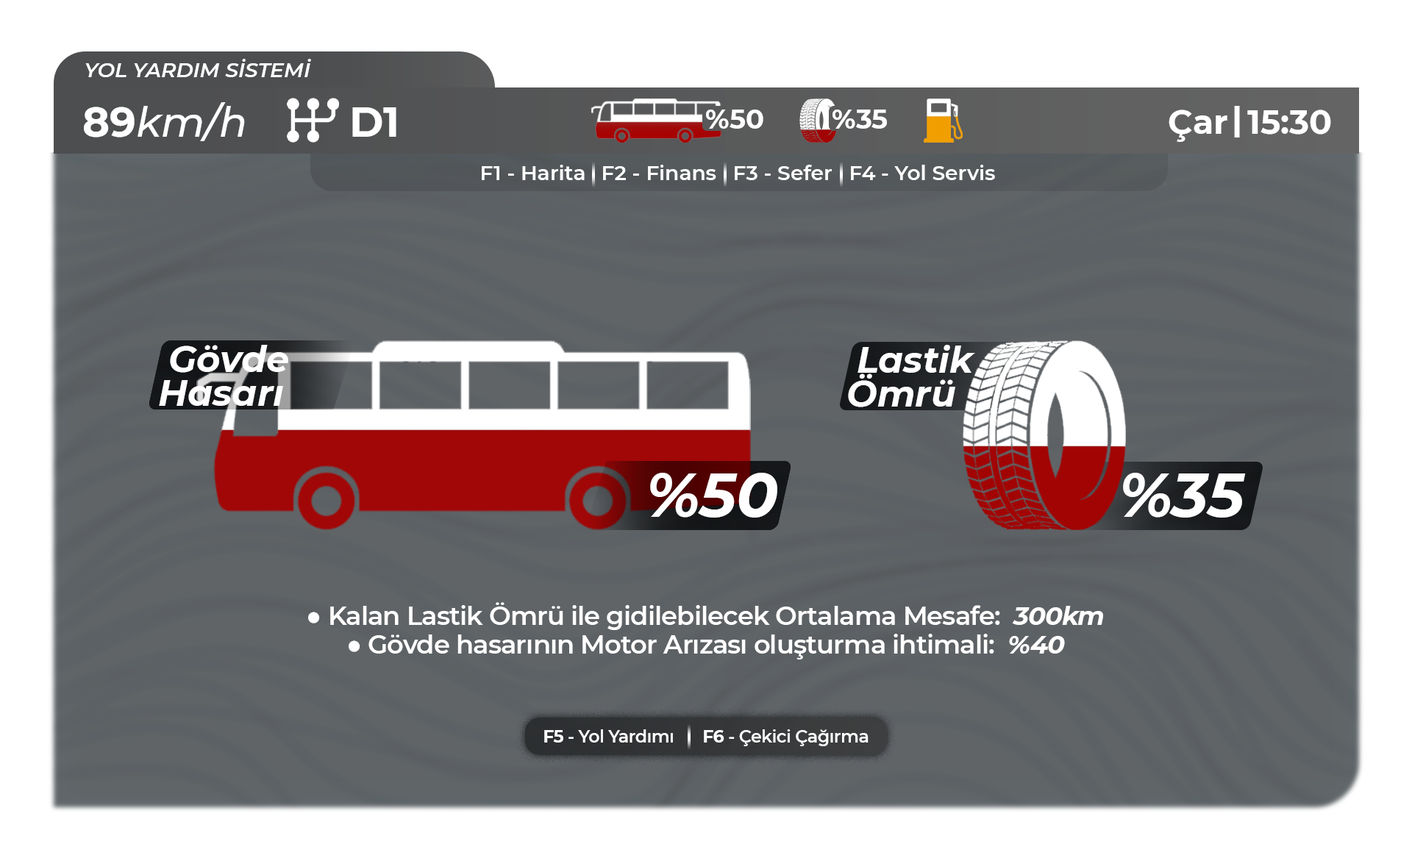
<style>
.page{position:relative;width:1412px;height:844px;background:#ffffff}
.page>*{position:absolute;margin:0}
.t1{font:20.7px "Montserrat-SemiBoldItalic";color:#ffffff}
.t2{font:41.4px "Montserrat-MediumItalic";color:#ffffff}
.t3{font:41.4px "Montserrat-Bold";color:#ffffff}
.t4{font:27.2px "Montserrat-Bold";color:#ffffff}
.t5{font:33.7px "Montserrat-Bold";color:#ffffff}
.t6{font:20.7px "Montserrat-SemiBold";color:#ffffff}
.t7{font:36.5px/33.7px "Montserrat-BoldItalic";color:#ffffff}
.t8{font:36.3px/33.5px "Montserrat-BoldItalic";color:#ffffff}
.t9{font:61.9px "Montserrat-BoldItalic";color:#ffffff}
.t10{font:61.6px "Montserrat-BoldItalic";color:#ffffff}
.t11{font:26px "Montserrat-SemiBold";letter-spacing:-0.025em;color:#ffffff}
.t12{font:26px "ArialMT";letter-spacing:-0.025em;color:#ffffff}
.t13{font:26px "Montserrat-BoldItalic";letter-spacing:-0.025em;color:#ffffff}
.t14{font:17.5px "Montserrat-SemiBold";letter-spacing:-0.025em;color:#ffffff}
.t15{font:17.5px "Montserrat-Bold";letter-spacing:-0.025em;color:#ffffff}
</style>
<div class="page">
<p class="t1" style="left:85px;top:59px;width:226px;height:18px">YOL YARDIM SİSTEMİ</p>
<p class="t2" style="left:84px;top:102px;width:161px;height:39px"><span class="t3">89</span>km/h</p>
<p class="t3" style="left:352px;top:107px;width:44px;height:30px">D1</p>
<p class="t4" style="left:706px;top:110px;width:57px;height:19px">%50</p>
<p class="t4" style="left:833px;top:110px;width:54px;height:19px">%35</p>
<p class="t5" style="left:1169px;top:110px;width:162px;height:32px">Çar  15:30</p>
<p class="t5" style="left:1234px;top:106px;width:6px;height:32px">|</p>
<p class="t6" style="left:482px;top:165px;width:103px;height:15px">F1 - Harita</p>
<p class="t6" style="left:603px;top:165px;width:113px;height:15px">F2 - Finans</p>
<p class="t6" style="left:735px;top:165px;width:97px;height:15px">F3 - Sefer</p>
<p class="t6" style="left:851px;top:165px;width:144px;height:15px">F4 - Yol Servis</p>
<p class="t7" style="left:159px;top:345px;width:129px;height:61px">Gövde<br>Hasarı</p>
<p class="t8" style="left:848px;top:345px;width:127px;height:62px">Lastik<br> Ömrü</p>
<p class="t9" style="left:650px;top:473px;width:48px;height:45px">%</p>
<p class="t9" style="left:698px;top:473px;width:79px;height:45px">50</p>
<p class="t10" style="left:1123px;top:473px;width:47px;height:45px">%</p>
<p class="t10" style="left:1169px;top:474px;width:77px;height:44px">35</p>
<p class="t11" style="left:308px;top:602px;width:795px;height:28px"><span class="t12">●</span> Kalan Lastik Ömrü ile gidilebilecek Ortalama Mesafe:  <span class="t13">300km</span></p>
<p class="t11" style="left:349px;top:634px;width:716px;height:26px"><span class="t12">●</span> Gövde hasarının Motor Arızası oluşturma ihtimali:  <span class="t13">%40</span></p>
<p class="t14" style="left:544px;top:730px;width:129px;height:13px"><span class="t15">F5 </span>- Yol Yardımı</p>
<p class="t14" style="left:704px;top:730px;width:165px;height:17px"><span class="t15">F6 </span>- Çekici Çağırma</p>
</div>
